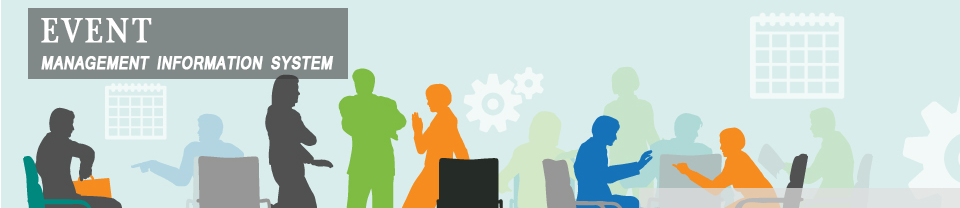
<style>
.page{position:relative;width:960px;height:208px;background:#d9edec}
.page>*{position:absolute;margin:0}
.t1{font:36px "PlantagenetCherokee";letter-spacing:0.1em;color:#ffffff;text-transform:uppercase;font-weight:bold;scale:0.8 1}
.t2{font:20px "Latha-Bold";letter-spacing:-0.025em;color:#ffffff;text-transform:uppercase;font-weight:bold;font-style:italic;scale:0.8 1}
</style>
<div class="page">
<p class="t1" style="left:41px;top:18px;width:111px;height:25px">event</p>
<p class="t2" style="left:41px;top:56px;width:293px;height:14px">management information SYSTEM</p>
</div>
